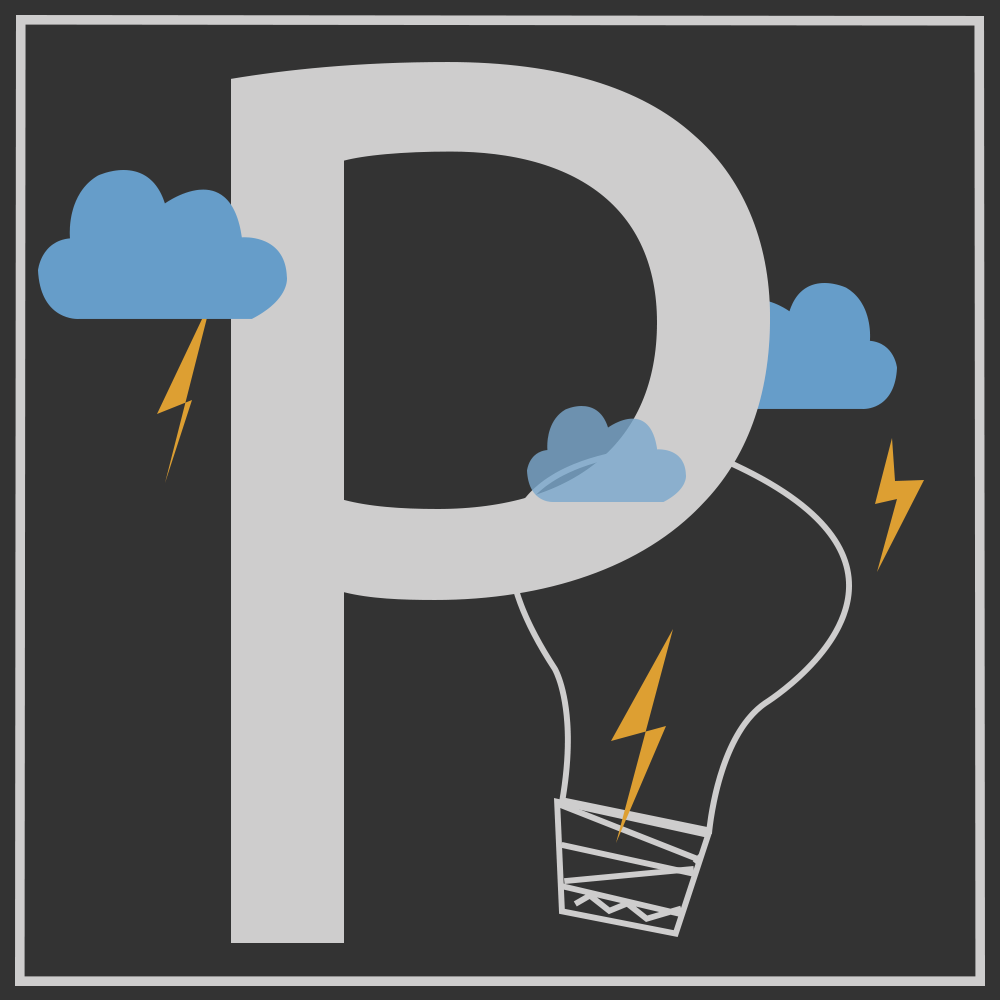
<style>
.page{position:relative;width:1000px;height:1000px;background:#333333}
.page>*{position:absolute;margin:0}
.t1{font:1298.7px "MyriadPro-Regular";color:#cecdcd}
</style>
<div class="page">
<p class="t1" style="left:231px;top:62px;width:540px;height:881px">P</p>
</div>
